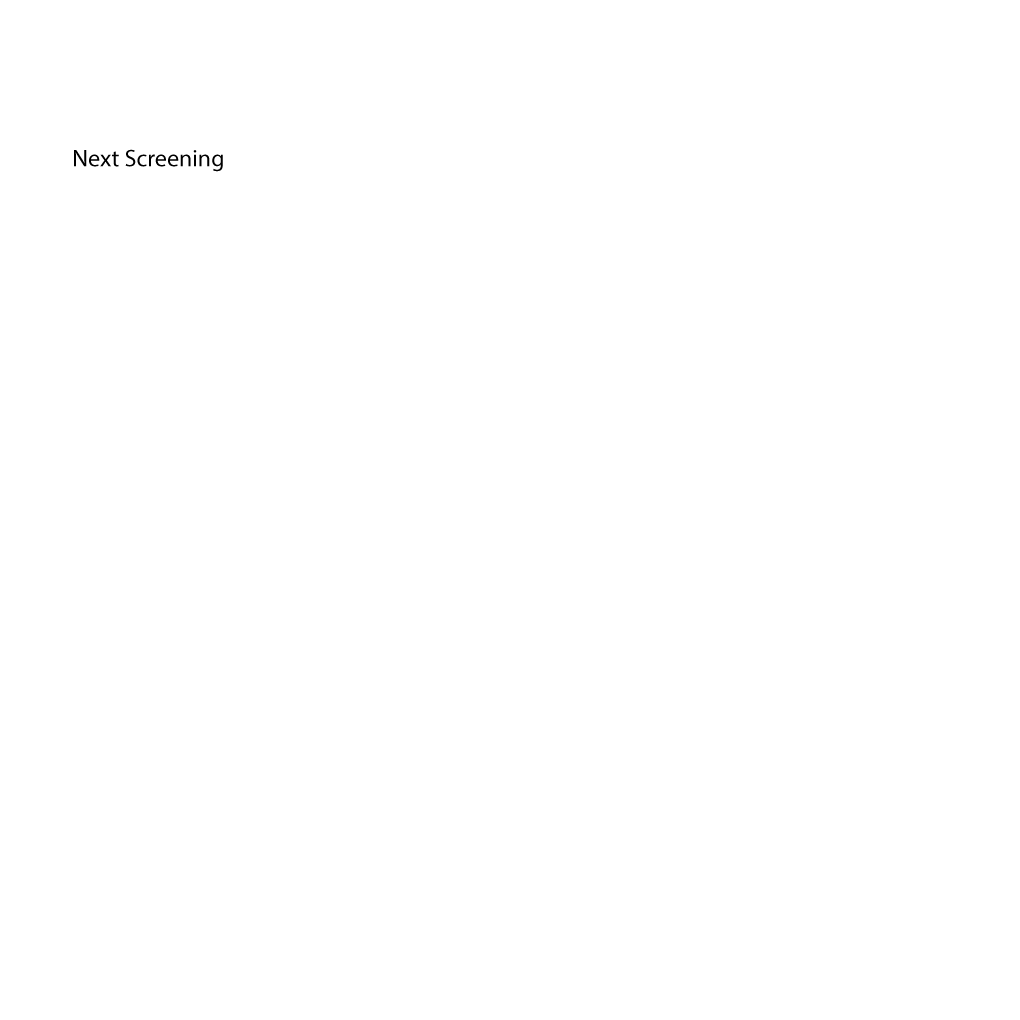
<style>
.page{position:relative;width:1020px;height:1020px;background:#ffffff}
.page>*{position:absolute;margin:0}
.t1{font:24px "MyriadPro-Regular";color:#000000}
</style>
<div class="page">
<p class="t1" style="left:74px;top:149px;width:149px;height:23px">Next Screening</p>
</div>
